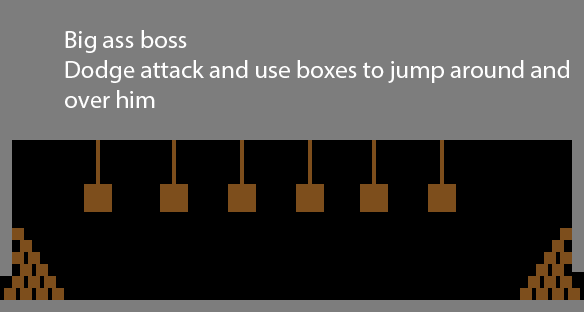
<style>
.page{position:relative;width:584px;height:312px;background:#7d7d7d}
.page>*{position:absolute;margin:0}
.t1{font:25px "MyriadPro-Regular";color:#ffffff}
</style>
<div class="page">
<p class="t1" style="left:65px;top:30px;width:504px;height:78px">Big ass boss<br>Dodge attack and use boxes to jump around and<br>over him</p>
</div>
